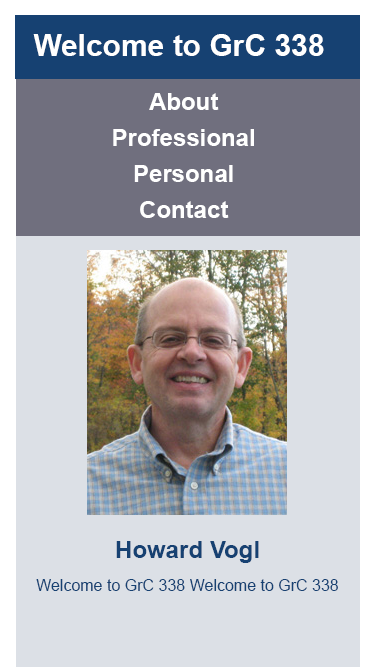
<style>
.page{position:relative;width:375px;height:667px;background:#dce0e6}
.page>*{position:absolute;margin:0}
.t1{font:30px "Arial-BoldMT";color:#ffffff}
.t2{font:24px/36px "Arial-BoldMT";color:#ffffff}
.t3{font:24px "Arial-BoldMT";color:#164172}
.t4{font:16px "ArialMT";color:#164172}
</style>
<div class="page">
<p class="t1" style="left:33px;top:34px;width:291px;height:22px">Welcome to GrC 338</p>
<p class="t2" style="left:113px;top:93px;width:141px;height:125px;text-align:center">About<br>Professional<br>Personal<br>Contact</p>
<p class="t3" style="left:116px;top:541px;width:143px;height:22px">Howard Vogl</p>
<p class="t4" style="left:36px;top:579px;width:302px;height:12px">Welcome to GrC 338 Welcome to GrC 338</p>
</div>
